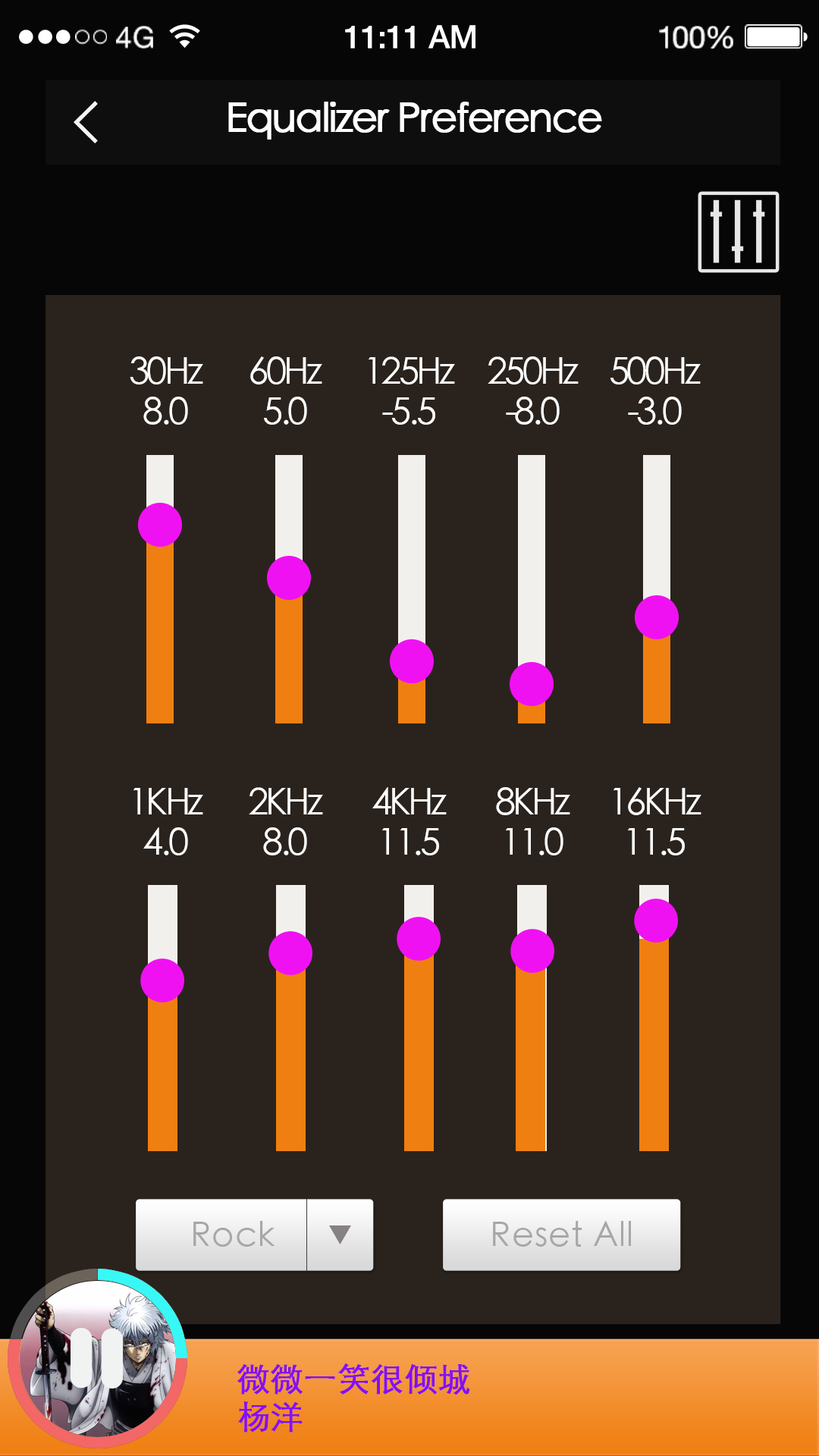
<style>
.page{position:relative;width:819px;height:1456px;background:#2a231d}
.page>*{position:absolute;margin:0}
.t1{font:29.4px "HelveticaNeue";letter-spacing:0.02em;color:#ffffff}
.t2{font:32px "HelveticaNeue-Medium";letter-spacing:-0.02em;color:#ffffff}
.t3{font:30.7px "HelveticaNeue";letter-spacing:-0.02em;color:#ffffff}
.t4{font:39.9px "STHeitiSC-Light";letter-spacing:-0.05em;color:#ffffff;font-weight:bold}
.t5{font:39.9px "STHeitiSC-Light";letter-spacing:-0.05em;color:#ffffff;text-transform:uppercase;font-weight:bold}
.t6{font:37.2px/39.9px "STHeitiSC-Light";letter-spacing:-0.075em;color:#ffffff}
.t7{font:33.9px "STHeitiSC-Light";letter-spacing:0.025em;color:#a7a7a7}
.t8{font:32.7px/37.6px "STHeitiSC-Light";color:#8410f0;font-weight:bold}
</style>
<div class="page">
<p class="t1" style="left:116px;top:26px;width:37px;height:23px">4G</p>
<p class="t2" style="left:345px;top:25px;width:130px;height:24px">11:11 AM</p>
<p class="t3" style="left:659px;top:26px;width:74px;height:23px">100%</p>
<p class="t4" style="left:228px;top:102px;width:374px;height:38px"><span class="t5">E</span>qualizer Preference</p>
<p class="t6" style="left:130px;top:356px;width:73px;height:69px;text-align:center">30Hz<br>8.0</p>
<p class="t6" style="left:250px;top:356px;width:72px;height:69px;text-align:center">60Hz<br>5.0</p>
<p class="t6" style="left:369px;top:356px;width:86px;height:69px;text-align:center">125Hz<br>-5.5</p>
<p class="t6" style="left:488px;top:356px;width:91px;height:69px;text-align:center">250Hz<br>-8.0</p>
<p class="t6" style="left:610px;top:356px;width:91px;height:69px;text-align:center">500Hz<br>-3.0</p>
<p class="t6" style="left:133px;top:788px;width:70px;height:67px;text-align:center">1KHz<br>4.0</p>
<p class="t6" style="left:249px;top:787px;width:74px;height:68px;text-align:center">2KHz<br>8.0</p>
<p class="t6" style="left:372px;top:787px;width:75px;height:68px;text-align:center">4KHz<br>11.5</p>
<p class="t6" style="left:496px;top:787px;width:74px;height:68px;text-align:center">8KHz<br>11.0</p>
<p class="t6" style="left:613px;top:787px;width:88px;height:68px;text-align:center">16KHz<br>11.5</p>
<p class="t7" style="left:193px;top:1221px;width:82px;height:26px">Rock</p>
<p class="t7" style="left:493px;top:1221px;width:138px;height:26px">Reset All</p>
<p class="t8" style="left:237px;top:1363px;width:233px;height:69px">微微一笑很倾城<br>杨洋</p>
</div>
